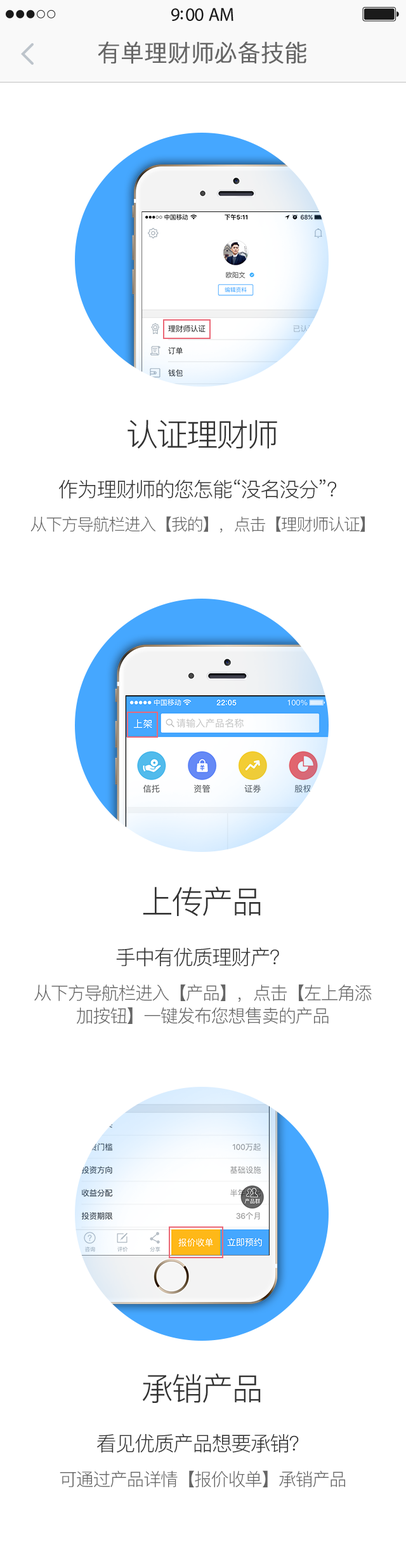
<style>
.page{position:relative;width:406px;height:1568px;background:#ffffff}
.page>*{position:absolute;margin:0}
.t1{font:23.5px "PingFang-SC-Regular";color:#666666;font-weight:bold}
.t2{font:6.8px "PingFang-SC-Regular"}
.t3{font:31.7px "PingFang-SC-Regular";letter-spacing:-0.05em;color:#333333}
.t4{font:20.3px "PingFang-SC-Regular";letter-spacing:-0.05em;color:#333333}
.t5{font:16.5px "PingFang-SC-Regular";letter-spacing:-0.05em;color:#666666}
.t6{font:17.8px/22.9px "PingFang-SC-Regular";letter-spacing:-0.05em;color:#666666}
.t7{font:17.8px "PingFang-SC-Regular";letter-spacing:-0.05em;color:#666666}
</style>
<div class="page">
<p class="t1" style="left:98px;top:41px;width:209px;height:23px">有单理财师必备技能</p>
<p class="t2" style="left:226px;top:272px;width:20px;height:7px">欧阳文</p>
<p class="t3" style="left:128px;top:420px;width:149px;height:29px">认证理财师</p>
<p class="t4" style="left:59px;top:479px;width:277px;height:20px">作为理财师的您怎能“没名没分”？</p>
<p class="t5" style="left:30px;top:516px;width:335px;height:17px">从下方导航栏进入【我的】，点击【理财师认证】</p>
<p class="t3" style="left:143px;top:886px;width:118px;height:31px">上传产品</p>
<p class="t4" style="left:116px;top:947px;width:163px;height:20px">手中有优质理财产？</p>
<p class="t6" style="left:34px;top:984px;width:338px;height:40px;text-align:center">从下方导航栏进入【产品】，点击【左上角添<br>加按钮】一键发布您想售卖的产品</p>
<p class="t3" style="left:142px;top:1373px;width:119px;height:30px">承销产品</p>
<p class="t4" style="left:97px;top:1433px;width:202px;height:20px">看见优质产品想要承销？</p>
<p class="t7" style="left:60px;top:1470px;width:285px;height:17px">可通过产品详情【报价收单】承销产品</p>
</div>
